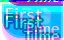
<style>
.page{position:relative;width:64px;height:40px}
.page>*{position:absolute;margin:0}
.t1{font:16px "JK-Gothic-M"}
</style>
<div class="page">
<p class="t1" style="left:5px;top:7px;width:37px;height:13px">First</p>
<p class="t1" style="left:24px;top:21px;width:35px;height:12px">Time</p>
</div>
